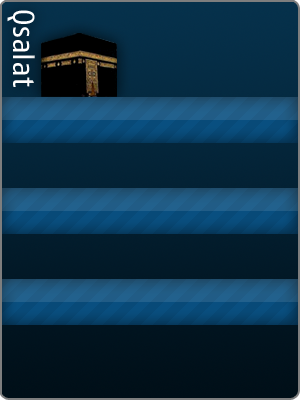
<style>
.page{position:relative;width:300px;height:400px}
.page>*{position:absolute;margin:0}
.t1{font:30px "FUTFREG";color:#ffffff}
</style>
<div class="page">
<p class="t1" style="left:7px;top:10px;width:28px;height:77px;rotate:90deg">Qsalat</p>
</div>
